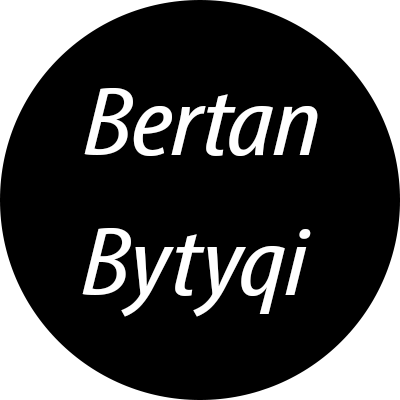
<style>
.page{position:relative;width:400px;height:400px;background:#000000}
.page>*{position:absolute;margin:0}
.t1{font:100px "MyriadPro-CondIt";color:#ffffff;scale:1.22 1}
</style>
<div class="page">
<p class="t1" style="left:82px;top:87px;width:236px;height:230px">Bertan<br>Bytyqi</p>
</div>
